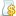
<style>
.page{position:relative;width:16px;height:16px;background:#ffffff}
.page>*{position:absolute;margin:0}
.t1{font:12px "Verdana";letter-spacing:0.01em}
</style>
<div class="page">
<p class="t1" style="left:8px;top:4px;width:7px;height:12px">$</p>
</div>
